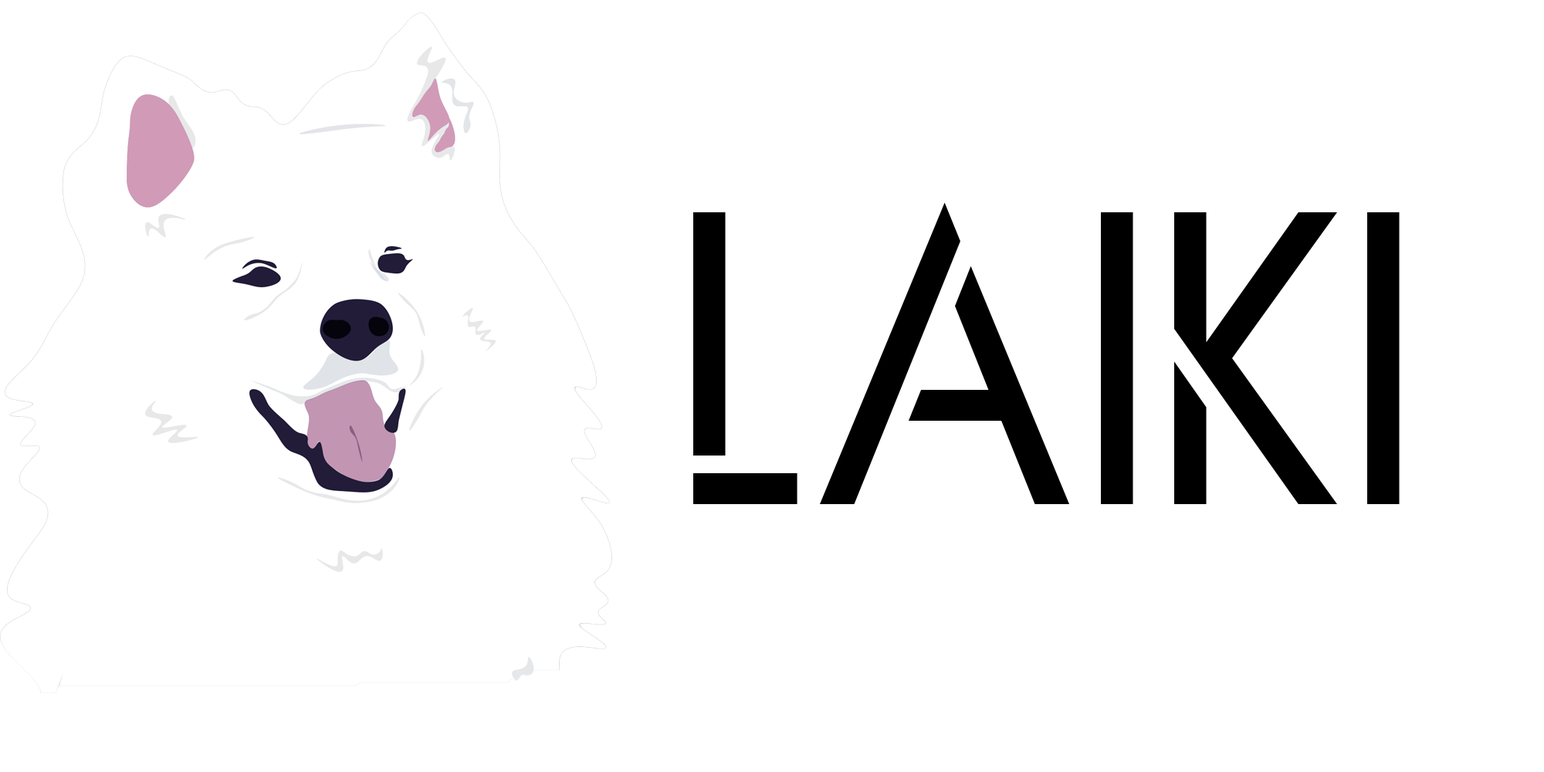
<style>
.page{position:relative;width:1544px;height:772px;background:#ffffff}
.page>*{position:absolute;margin:0}
.t1{font:386.1px "KapitalRegularStencil";color:#000000}
</style>
<div class="page">
<p class="t1" style="left:693px;top:202px;width:707px;height:302px">LAIKI</p>
</div>
